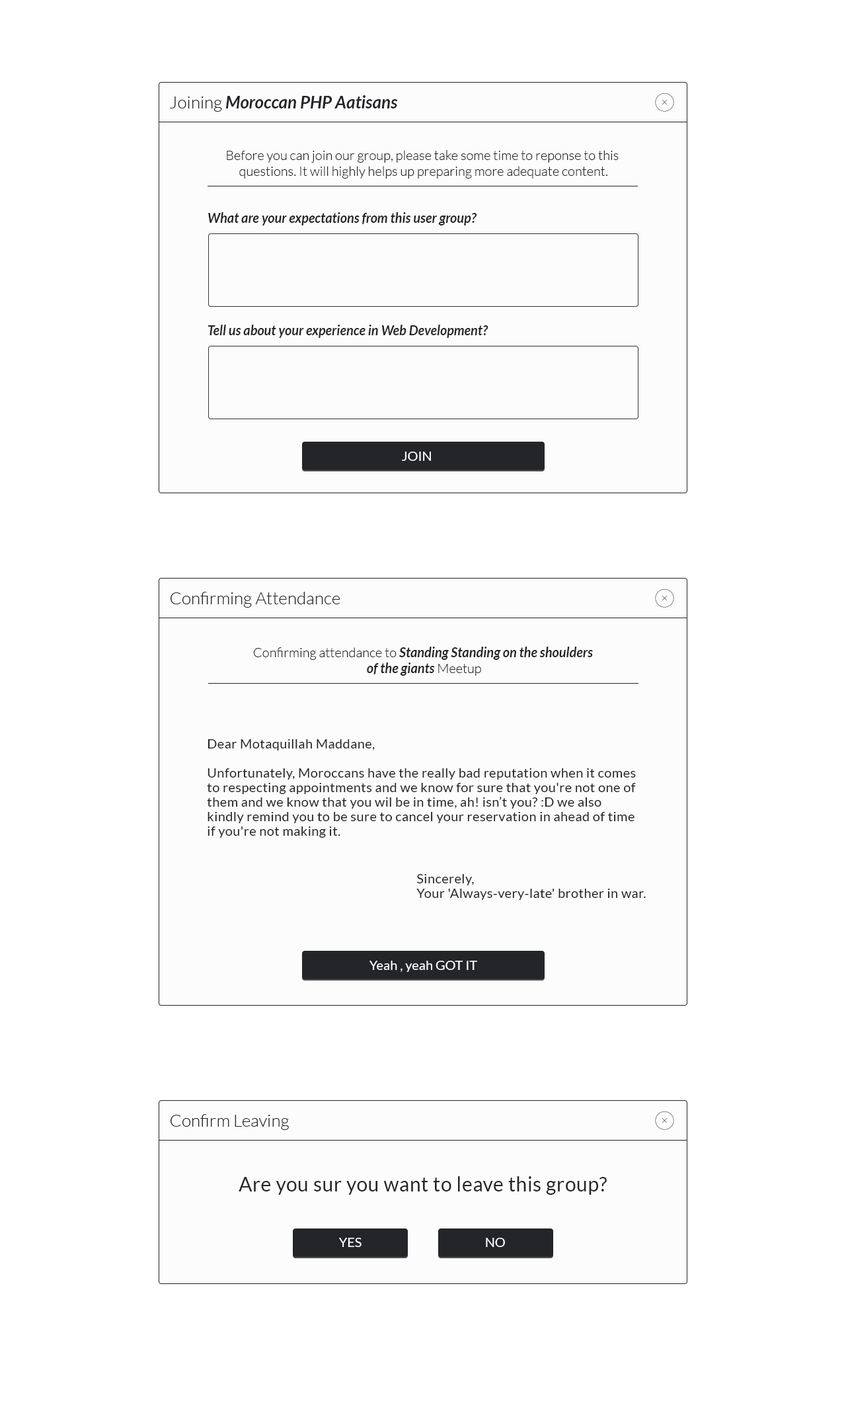
<style>
.page{position:relative;width:846px;height:1409px;background:#ffffff}
.page>*{position:absolute;margin:0}
.t1{font:17.2px "Lato-BoldItalic";color:#242528}
.t2{font:17.2px "Lato-Light";color:#242528}
.t3{font:13.2px "Lato-Light";color:#242528}
.t4{font:13.2px "Lato-BoldItalic";color:#242528}
.t5{font:13.2px "Lato-Regular";color:#ffffff}
.t6{font:13.2px/14.5px "Lato-Regular";letter-spacing:0.02em;color:#242528}
.t7{font:19.8px "Lato-Regular";letter-spacing:0.02em;color:#242528}
</style>
<div class="page">
<p class="t1" style="left:170px;top:95px;width:228px;height:17px"><span class="t2">Joining </span>Moroccan PHP Aatisans</p>
<p class="t3" style="left:227px;top:150px;width:392px;height:29px;text-align:center">Before you can join our group, please take some time to reponse to this <br>questions. It will highly helps up preparing more adequate content.</p>
<p class="t4" style="left:208px;top:212px;width:269px;height:13px">What are your expectations from this user group?</p>
<p class="t4" style="left:208px;top:325px;width:281px;height:13px">Tell us about your experience in Web Development?</p>
<p class="t5" style="left:402px;top:452px;width:29px;height:9px">JOIN</p>
<p class="t2" style="left:171px;top:592px;width:170px;height:16px">Confirming Attendance</p>
<p class="t4" style="left:253px;top:647px;width:340px;height:29px;text-align:center"><span class="t3">Confirming attendance to </span>Standing Standing on the shoulders <br>of the giants <span class="t3">Meetup</span></p>
<p class="t6" style="left:207px;top:739px;width:429px;height:99px">Dear Motaquillah Maddane,<br><br>Unfortunately, Moroccans have the really bad reputation when it comes to respecting appointments and we know for sure that you're not one of them and we know that you wil be in time, ah! isn’t you? :D we also kindly remind you to be sure to cancel your reservation in ahead of time if you're not making it.</p>
<p class="t6" style="left:417px;top:874px;width:229px;height:26px">Sincerely,<br>Your 'Always-very-late' brother in war.</p>
<p class="t5" style="left:370px;top:961px;width:107px;height:11px">Yeah , yeah GOT IT</p>
<p class="t2" style="left:171px;top:1114px;width:119px;height:16px">Confirm Leaving</p>
<p class="t7" style="left:239px;top:1176px;width:368px;height:19px">Are you sur you want to leave this group?</p>
<p class="t5" style="left:339px;top:1238px;width:23px;height:9px">YES</p>
<p class="t5" style="left:486px;top:1238px;width:19px;height:9px">NO</p>
</div>
